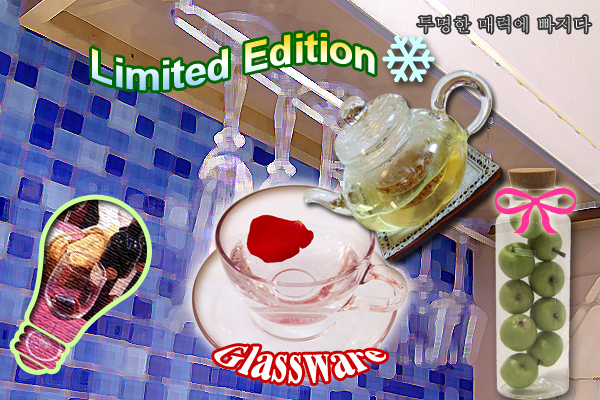
<style>
.page{position:relative;width:600px;height:400px}
.page>*{position:absolute;margin:0}
.t1{font:40px "Arial-BoldMT"}
.t2{font:32px "TimesNewRomanPS-BoldMT";color:#ffffff}
</style>
<div class="page">
<p class="t1" style="left:92px;top:32px;width:283px;height:59px">Limited Edition</p>
<p class="t2" style="left:214px;top:346px;width:173px;height:38px">Glassware</p>
</div>
